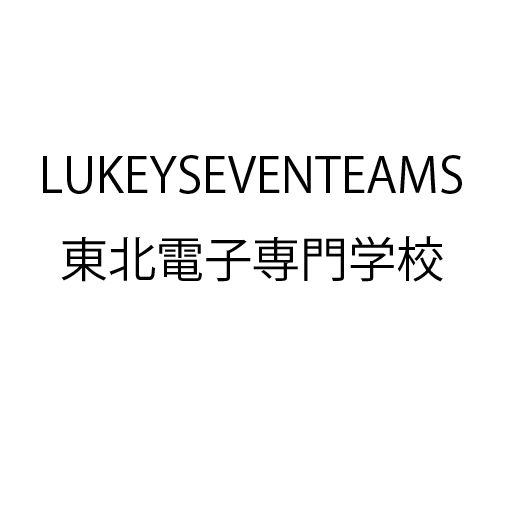
<style>
.page{position:relative;width:512px;height:512px;background:#ffffff}
.page>*{position:absolute;margin:0}
.t1{font:48px "KozGoPro-Regular";color:#000000}
</style>
<div class="page">
<p class="t1" style="left:43px;top:155px;width:419px;height:127px;text-align:center">LUKEYSEVENTEAMS<br>東北電子専門学校</p>
</div>
